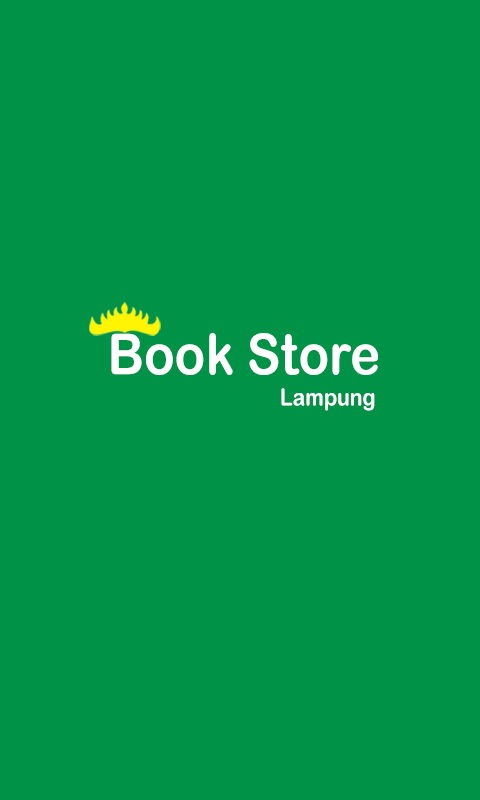
<style>
.page{position:relative;width:480px;height:800px;background:#009347}
.page>*{position:absolute;margin:0}
.t1{font:56.7px "ArialRoundedMTBold";color:#ffffff;scale:0.89 1}
.t2{font:23.6px "ArialRoundedMTBold";color:#ffffff;scale:0.89 1}
</style>
<div class="page">
<p class="t1" style="left:111px;top:333px;width:267px;height:42px">Book Store</p>
<p class="t2" style="left:281px;top:388px;width:94px;height:23px">Lampung</p>
</div>
